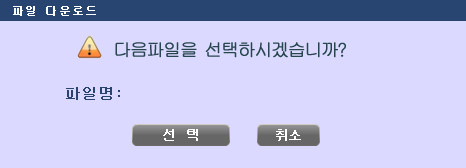
<style>
.page{position:relative;width:466px;height:168px;background:#dbd9ff}
.page>*{position:absolute;margin:0}
.t1{font:18px "GulimChe";letter-spacing:-0.1em;color:#27454d;font-weight:bold}
.t2{font:13px "Gulim";letter-spacing:-0.1em;color:#ffffff;font-weight:bold}
</style>
<div class="page">
<p class="t1" style="left:115px;top:42px;width:231px;height:16px">다음파일을 선택하시겠습니까?</p>
<p class="t2" style="left:163px;top:129px;width:35px;height:12px">선   택</p>
<p class="t2" style="left:276px;top:129px;width:25px;height:12px">취소</p>
</div>
